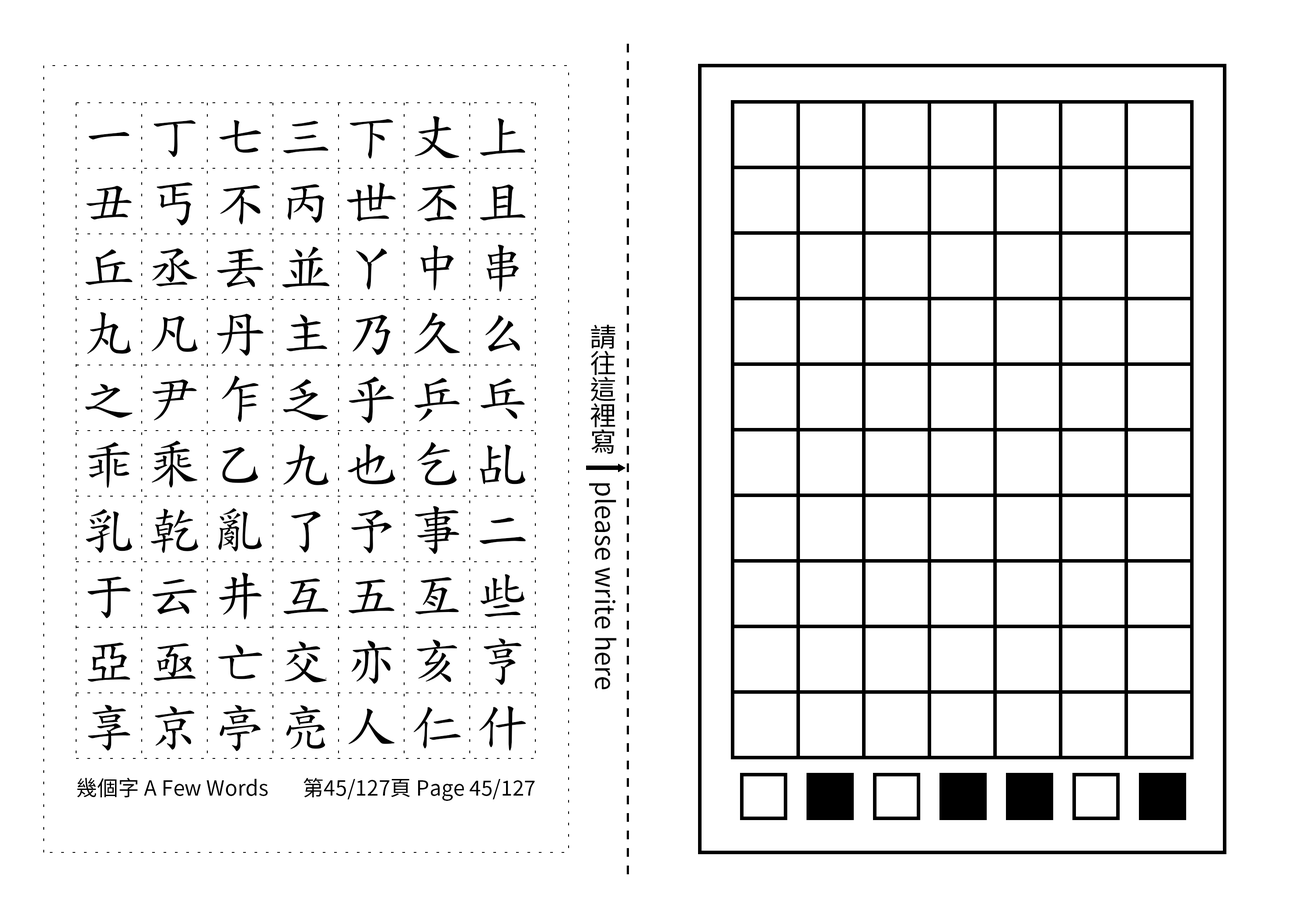
<style>
.page{position:relative;width:1299px;height:918px;background:#ffffff}
.page>*{position:absolute;margin:0}
.t1{font:52.5px/65.6px "TW-Kai-98_1";letter-spacing:0.25em;color:#000000}
.t2{font:26.2px "SourceHanSansTC-Regular";color:#000000}
.t3{font:21px "SourceHanSansTC-Regular";color:#000000}
</style>
<div class="page">
<p class="t1" style="left:85px;top:116px;width:441px;height:636px;text-align:center">一丁七三下丈上丑丐不丙世丕且丘丞丟並丫中串丸凡丹主乃久么之尹乍乏乎乒乓乖乘乙九也乞乩乳乾亂了予事二于云井互五亙些亞亟亡交亦亥亨享京亭亮人仁什</p>
<p class="t2" style="left:589px;top:324px;width:28px;height:366px;text-align:center">請往這裡寫　please write here</p>
<p class="t3" style="left:77px;top:778px;width:191px;height:20px">幾個字 A Few Words</p>
<p class="t3" style="left:303px;top:778px;width:232px;height:23px">第45/127頁 Page 45/127</p>
</div>
